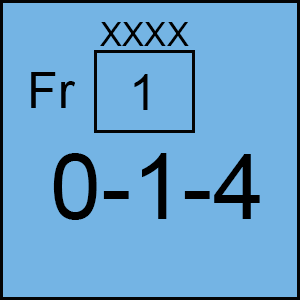
<style>
.page{position:relative;width:300px;height:300px;background:#74b4e4}
.page>*{position:absolute;margin:0}
.t1{font:33.3px "ArialMT";color:#000000}
.t2{font:50px "ArialMT";color:#000000}
.t3{font:91.7px "ArialMT";color:#000000}
</style>
<div class="page">
<p class="t1" style="left:100px;top:22px;width:89px;height:24px">XXXX</p>
<p class="t2" style="left:31px;top:72px;width:44px;height:36px">Fr</p>
<p class="t2" style="left:134px;top:74px;width:14px;height:36px">1</p>
<p class="t3" style="left:53px;top:153px;width:207px;height:67px">0-1-4</p>
</div>
